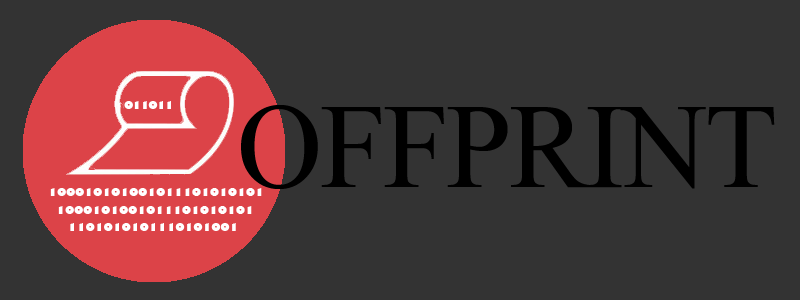
<style>
.page{position:relative;width:800px;height:300px;background:#333333}
.page>*{position:absolute;margin:0}
.t1{font:11px "GillSans-UltraBold";letter-spacing:-0.1em;color:#ffffff}
.t2{font:120px "TimesNewRomanPSMT";letter-spacing:-0.02em;color:#000000}
.t3{font:11px "GillSans-UltraBold";letter-spacing:-0.02em;color:#ffffff}
</style>
<div class="page">
<p class="t1" style="left:124px;top:101px;width:47px;height:8px">011011</p>
<p class="t2" style="left:241px;top:105px;width:534px;height:84px">OFFPRINT</p>
<p class="t3" style="left:50px;top:188px;width:212px;height:8px">100010101001011101010101</p>
<p class="t3" style="left:58px;top:206px;width:194px;height:8px">1000101001011101010101</p>
<p class="t3" style="left:70px;top:223px;width:166px;height:8px">1101010101110101001</p>
</div>
